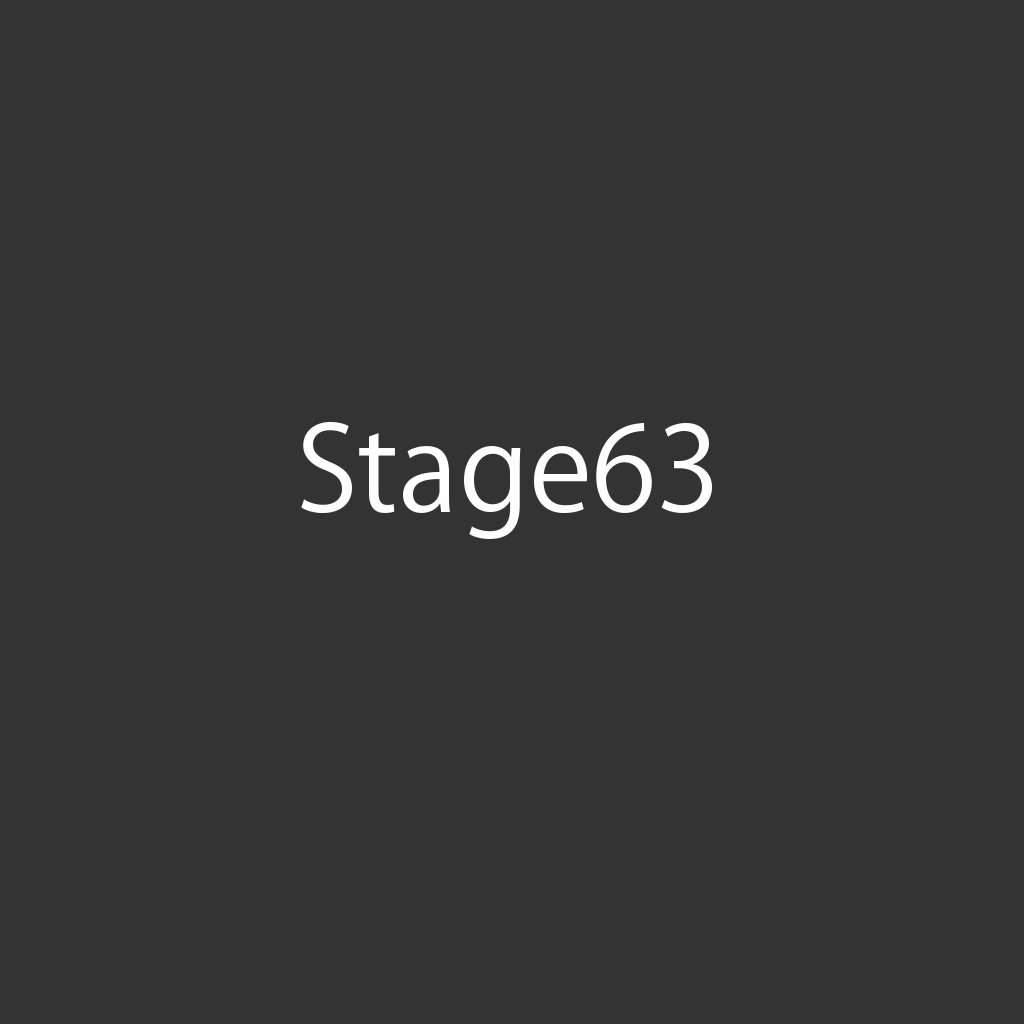
<style>
.page{position:relative;width:1024px;height:1024px;background:#333333}
.page>*{position:absolute;margin:0}
.t1{font:116.7px "KozGoPr6N-Regular";color:#fefefe}
</style>
<div class="page">
<p class="t1" style="left:301px;top:421px;width:411px;height:118px">Stage63</p>
</div>
